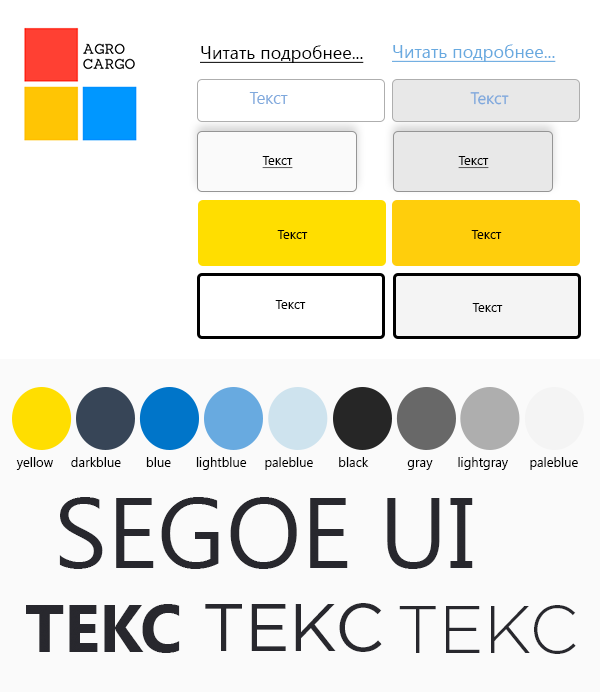
<style>
.page{position:relative;width:600px;height:692px;background:#fafafa}
.page>*{position:absolute;margin:0}
.t1{font:18px "SegoeUI";color:#000000;text-decoration:underline}
.t2{font:18px "SegoeUI";color:#68aae0;text-decoration:underline}
.t3{font:16.7px "SegoeUI";color:#7fa9dd}
.t4{font:13px "SegoeUI";color:#000000;text-decoration:underline}
.t5{font:13px "SegoeUI";color:#000000}
.t6{font:100px "SegoeUI";color:#28282e;text-transform:uppercase}
.t7{font:66.7px "SegoeUI-Bold";color:#28282e;text-transform:uppercase}
.t8{font:66.7px "GothamPro";color:#28282e;text-transform:uppercase}
.t9{font:66.7px "GothamPro-Light";color:#28282e;text-transform:uppercase}
</style>
<div class="page">
<p class="t1" style="left:200px;top:45px;width:164px;height:18px">Читать подробнее...</p>
<p class="t2" style="left:392px;top:44px;width:164px;height:18px">Читать подробнее...</p>
<p class="t3" style="left:249px;top:92px;width:39px;height:12px">Текст</p>
<p class="t3" style="left:470px;top:92px;width:39px;height:13px">Текст</p>
<p class="t4" style="left:262px;top:156px;width:31px;height:13px">Текст</p>
<p class="t4" style="left:458px;top:156px;width:31px;height:13px">Текст</p>
<p class="t5" style="left:277px;top:230px;width:31px;height:9px">Текст</p>
<p class="t5" style="left:471px;top:230px;width:31px;height:9px">Текст</p>
<p class="t5" style="left:275px;top:300px;width:31px;height:9px">Текст</p>
<p class="t5" style="left:472px;top:303px;width:31px;height:9px">Текст</p>
<p class="t5" style="left:16px;top:457px;width:562px;height:13px">yellow     darkblue       blue       lightblue     paleblue       black           gray       lightgray      paleblue</p>
<p class="t6" style="left:59px;top:497px;width:414px;height:72px">Segoe UI</p>
<p class="t7" style="left:26px;top:604px;width:154px;height:49px">ТЕКС</p>
<p class="t8" style="left:205px;top:603px;width:177px;height:49px">ТЕКС</p>
<p class="t9" style="left:399px;top:605px;width:177px;height:49px">ТЕКС</p>
</div>
